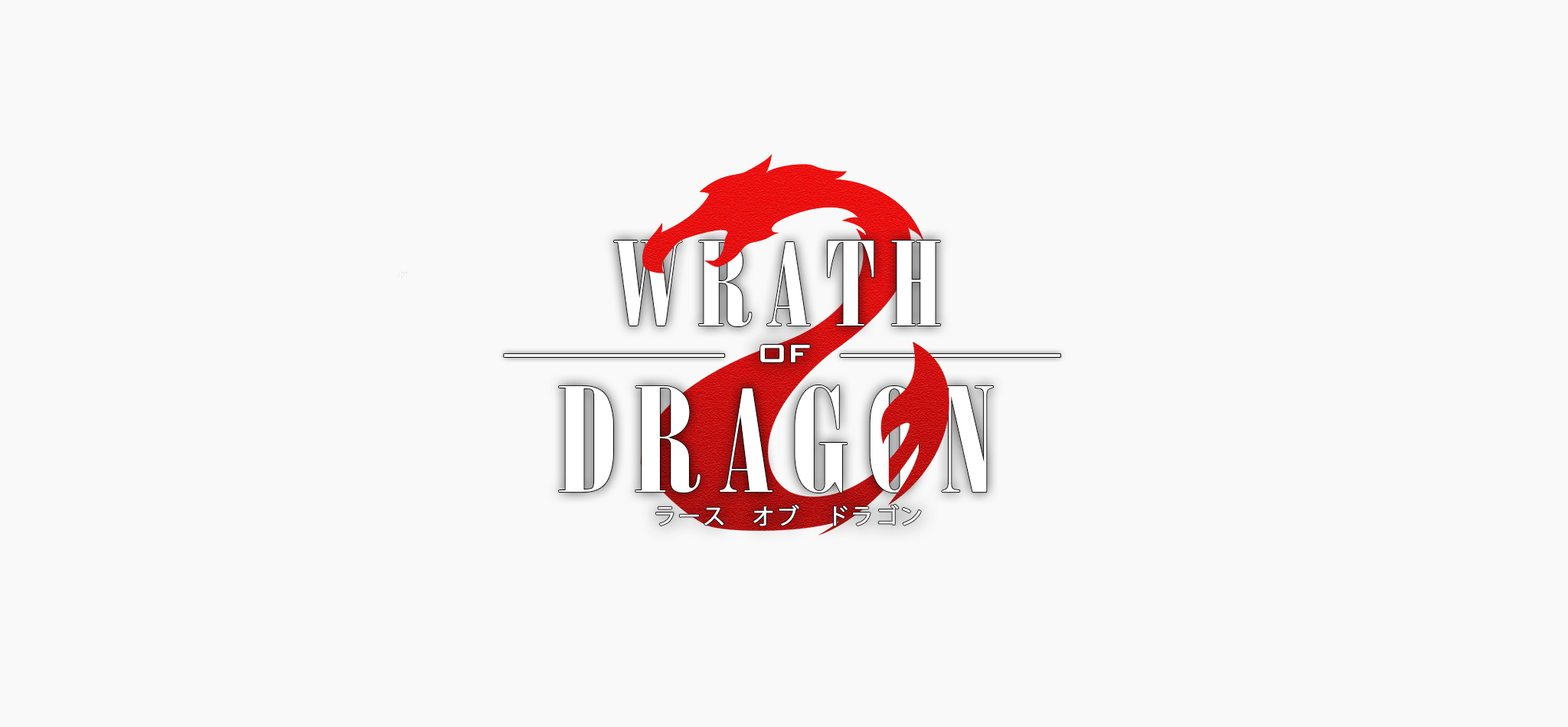
<style>
.page{position:relative;width:1568px;height:727px;background:#f9f9f9}
.page>*{position:absolute;margin:0}
.t1{font:116px "Onyx";letter-spacing:0.1em;color:#ffffff;scale:1.25 1}
.t2{font:41.8px "BankGothicBT-Medium";color:#ffffff}
.t3{font:143px "Onyx";letter-spacing:0.1em;color:#ffffff;scale:1.25 1}
.t4{font:21.9px "KozGoPr6N-Regular";letter-spacing:0.1em;color:#ffffff;font-weight:bold}
</style>
<div class="page">
<p class="t1" style="left:613px;top:240px;width:328px;height:86px">WRATH</p>
<p class="t2" style="left:760px;top:345px;width:50px;height:17px">of</p>
<p class="t3" style="left:559px;top:384px;width:435px;height:108px">DRAGON</p>
<p class="t4" style="left:656px;top:504px;width:265px;height:22px">ラース　オブ　ドラゴン</p>
</div>
